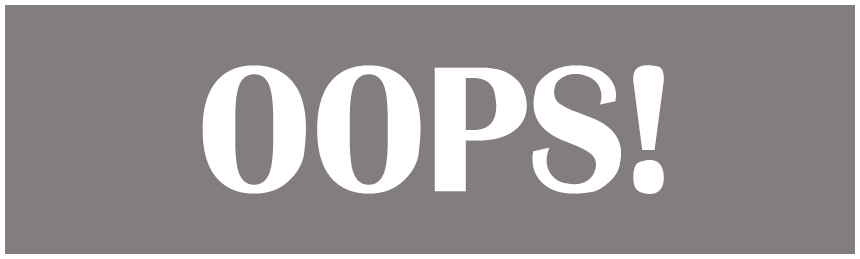
<style>
.page{position:relative;width:860px;height:259px;background:#847d7d}
.page>*{position:absolute;margin:0}
.t1{font:171px "Grenoble-Bold";color:#ffffff}
</style>
<div class="page">
<p class="t1" style="left:202px;top:65px;width:462px;height:129px">OOPS!</p>
</div>
